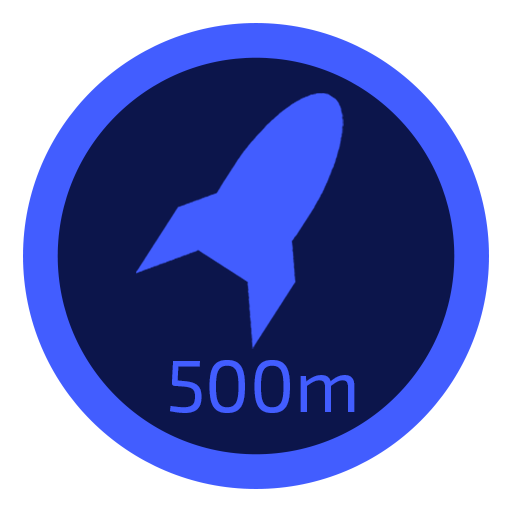
<style>
.page{position:relative;width:512px;height:512px;background:#0c154b}
.page>*{position:absolute;margin:0}
.t1{font:74.2px "Exo2-Regular";color:#425dff}
</style>
<div class="page">
<p class="t1" style="left:170px;top:360px;width:185px;height:53px">500m</p>
</div>
